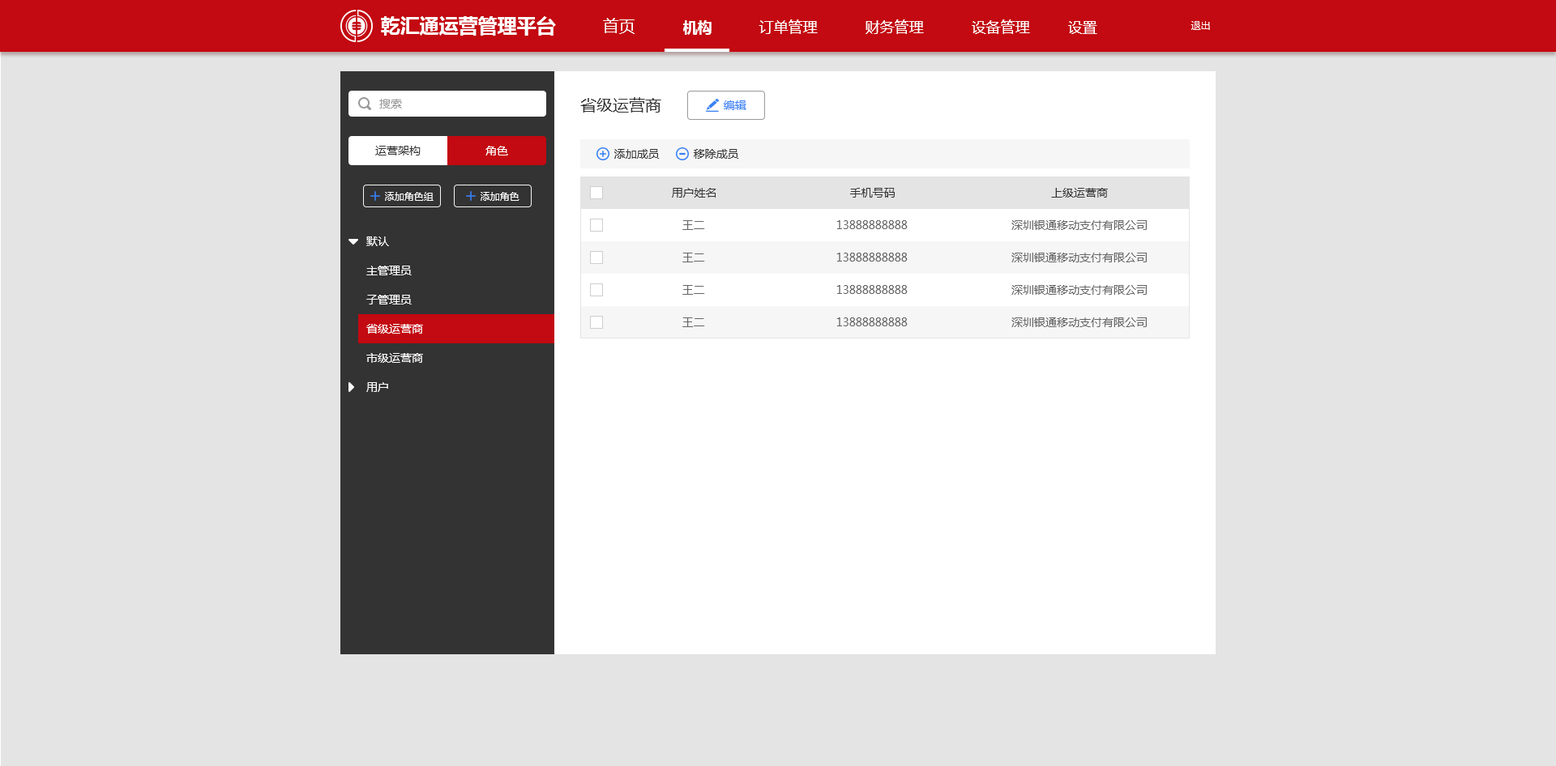
<style>
.page{position:relative;width:1556px;height:766px;background:#e4e4e4}
.page>*{position:absolute;margin:0}
.t1{font:19.4px "MicrosoftYaHei-Bold";color:#ffffff}
.t2{font:16.2px "MicrosoftYaHei";color:#ffffff}
.t3{font:14.6px "MicrosoftYaHei-Bold";color:#ffffff}
.t4{font:14.6px "MicrosoftYaHei";color:#ffffff}
.t5{font:9.7px "MicrosoftYaHei";color:#ffffff}
.t6{font:11.3px "MicrosoftYaHei";color:#999999}
.t7{font:16.2px "MicrosoftYaHei";color:#333333}
.t8{font:11.3px "MicrosoftYaHei";color:#3880f6}
.t9{font:11.3px "MicrosoftYaHei";color:#333333}
.t10{font:11.3px "MicrosoftYaHei";color:#ffffff}
.t11{font:11.3px "MicrosoftYaHei";color:#666666}
</style>
<div class="page">
<p class="t1" style="left:381px;top:16px;width:175px;height:20px">乾汇通运营管理平台</p>
<p class="t2" style="left:603px;top:18px;width:31px;height:16px">首页</p>
<p class="t3" style="left:683px;top:20px;width:28px;height:15px">机构</p>
<p class="t4" style="left:758px;top:19px;width:60px;height:15px">订单管理</p>
<p class="t4" style="left:865px;top:19px;width:59px;height:15px">财务管理</p>
<p class="t4" style="left:971px;top:19px;width:59px;height:15px">设备管理</p>
<p class="t4" style="left:1068px;top:21px;width:29px;height:13px">设置</p>
<p class="t5" style="left:1190px;top:21px;width:20px;height:9px">退出</p>
<p class="t6" style="left:379px;top:99px;width:23px;height:10px">搜索</p>
<p class="t7" style="left:580px;top:97px;width:81px;height:16px">省级运营商</p>
<p class="t8" style="left:724px;top:100px;width:22px;height:10px">编辑</p>
<p class="t9" style="left:375px;top:146px;width:46px;height:10px">运营架构</p>
<p class="t10" style="left:485px;top:146px;width:23px;height:10px">角色</p>
<p class="t9" style="left:614px;top:149px;width:46px;height:10px">添加成员</p>
<p class="t9" style="left:694px;top:149px;width:45px;height:10px">移除成员</p>
<p class="t5" style="left:385px;top:192px;width:48px;height:9px">添加角色组</p>
<p class="t5" style="left:480px;top:192px;width:39px;height:9px">添加角色</p>
<p class="t9" style="left:672px;top:188px;width:44px;height:10px">用户姓名</p>
<p class="t9" style="left:850px;top:188px;width:45px;height:10px">手机号码</p>
<p class="t9" style="left:1051px;top:188px;width:57px;height:10px">上级运营商</p>
<p class="t11" style="left:682px;top:220px;width:23px;height:10px">王二</p>
<p class="t11" style="left:836px;top:220px;width:71px;height:9px">13888888888</p>
<p class="t11" style="left:1011px;top:220px;width:136px;height:10px">深圳银通移动支付有限公司</p>
<p class="t10" style="left:366px;top:237px;width:23px;height:9px">默认</p>
<p class="t11" style="left:682px;top:253px;width:23px;height:10px">王二</p>
<p class="t11" style="left:836px;top:253px;width:71px;height:9px">13888888888</p>
<p class="t11" style="left:1011px;top:253px;width:136px;height:10px">深圳银通移动支付有限公司</p>
<p class="t10" style="left:366px;top:266px;width:46px;height:9px">主管理员</p>
<p class="t11" style="left:682px;top:285px;width:23px;height:10px">王二</p>
<p class="t11" style="left:836px;top:285px;width:71px;height:9px">13888888888</p>
<p class="t11" style="left:1011px;top:285px;width:136px;height:10px">深圳银通移动支付有限公司</p>
<p class="t10" style="left:366px;top:295px;width:46px;height:10px">子管理员</p>
<p class="t11" style="left:682px;top:318px;width:23px;height:9px">王二</p>
<p class="t11" style="left:836px;top:318px;width:71px;height:9px">13888888888</p>
<p class="t11" style="left:1011px;top:318px;width:136px;height:9px">深圳银通移动支付有限公司</p>
<p class="t10" style="left:366px;top:324px;width:57px;height:10px">省级运营商</p>
<p class="t10" style="left:366px;top:353px;width:57px;height:10px">市级运营商</p>
<p class="t10" style="left:366px;top:382px;width:22px;height:10px">用户</p>
</div>
